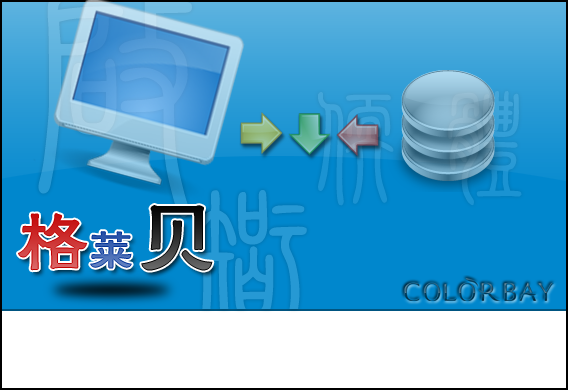
<style>
.page{position:relative;width:568px;height:390px;background:#ffffff}
.page>*{position:absolute;margin:0}
.t1{font:72px "FZHLJW--GB1-0";letter-spacing:-0.025em}
.t2{font:48px "FZHLJW--GB1-0";letter-spacing:-0.05em}
.t3{font:88px "FZHLJW--GB1-0";letter-spacing:-0.025em}
</style>
<div class="page">
<p class="t1" style="left:18px;top:205px;width:195px;height:66px">格<span class="t2">莱</span><span class="t3">贝</span></p>
</div>
